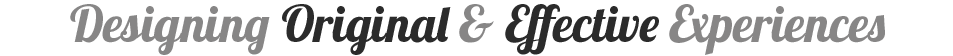
<style>
.page{position:relative;width:953px;height:56px;background:#ffffff}
.page>*{position:absolute;margin:0}
.t1{font:50.5px "Lobster1.4";color:#878686}
.t2{font:50.5px "Lobster1.4";color:#2b2b2b}
</style>
<div class="page">
<p class="t1" style="left:70px;top:4px;width:815px;height:51px">Designing <span class="t2">Original </span>&amp;<span class="t2"> Effective </span>Experiences</p>
</div>
